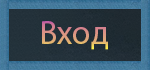
<style>
.page{position:relative;width:150px;height:70px}
.page>*{position:absolute;margin:0}
.t1{font:34px "MyriadPro-Regular"}
</style>
<div class="page">
<p class="t1" style="left:42px;top:21px;width:66px;height:29px">Вход</p>
</div>
